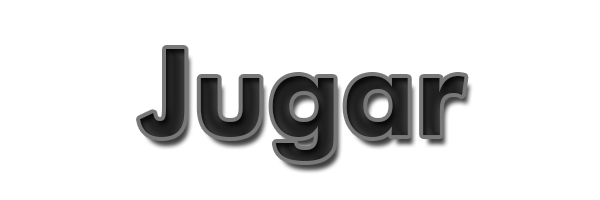
<style>
.page{position:relative;width:600px;height:200px;background:#ffffff}
.page>*{position:absolute;margin:0}
.t1{font:120px "FuturaBT-Heavy";color:#212121}
</style>
<div class="page">
<p class="t1" style="left:140px;top:49px;width:325px;height:112px">Jugar</p>
</div>
